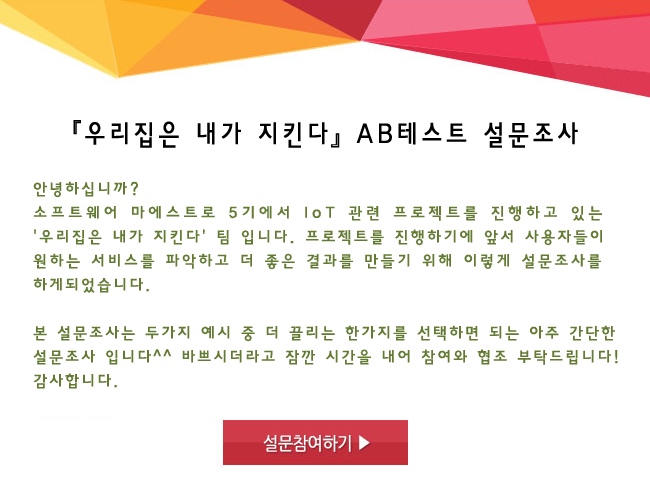
<style>
.page{position:relative;width:650px;height:500px;background:#ffffff}
.page>*{position:absolute;margin:0}
.t1{font:28.8px "YDIYGO220-KSCpc-EUC-H";color:#000000;font-weight:bold;scale:0.83 1}
.t2{font:28.8px "Gulim";color:#000000;font-weight:bold;scale:0.83 1}
.t3{font:16px/24px "YDIYGO230-KSCpc-EUC-H";color:#637a32}
.t4{font:16px/24px "YDIYGO230-KSCpc-EUC-H";letter-spacing:0.1em;color:#637a32}
.t5{font:16px/24px "YDIYGO230-KSCpc-EUC-H";letter-spacing:0.015em;color:#637a32}
.t6{font:16px/24px "YDIYGO230-KSCpc-EUC-H";letter-spacing:0.03em;color:#637a32}
</style>
<div class="page">
<p class="t1" style="left:73px;top:120px;width:505px;height:28px"><span class="t2">『</span>우리집은 내가 지킨다<span class="t2">』</span>AB테스트 설문조사</p>
<p class="t3" style="left:33px;top:181px;width:585px;height:208px">안녕하십니까?<br><span class="t4">소프트웨어 마에스트로 5기에서 IoT 관련 프로젝트를 진행하고 있는 <br></span><span class="t5">'우리집은 내가 지킨다' 팀 입니다. 프로젝트를 진행하기에 앞서 사용자들이<br></span><span class="t6">원하는 서비스를 파악하고 더 좋은 결과를 만들기 위해 이렇게 설문조사를<br></span>하게되었습니다.<br><br>본 설문조사는 두가지 예시 중 더 끌리는 한가지를 선택하면 되는 아주 간단한<br>설문조사 입니다^^ 바쁘시더라고 잠깐 시간을 내어 참여와 협조 부탁드립니다!<br>감사합니다.</p>
</div>
